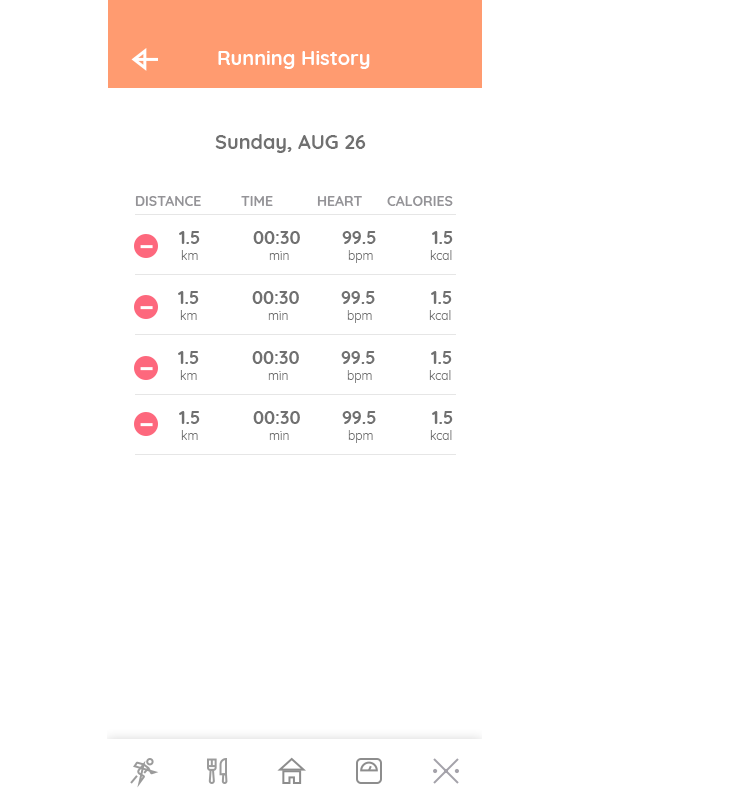
<style>
.page{position:relative;width:743px;height:812px;background:#ffffff}
.page>*{position:absolute;margin:0}
.t1{font:20px "Quicksand-Bold";color:#ffffff}
.t2{font:20px "Quicksand-Bold";color:#707070}
.t3{font:14px "Quicksand-Bold";color:#949397}
.t4{font:18px "Quicksand-Bold";color:#707070}
.t5{font:12px "Quicksand-Regular";color:#707070}
</style>
<div class="page">
<p class="t1" style="left:218px;top:51px;width:152px;height:18px">Running History</p>
<p class="t2" style="left:215px;top:134px;width:151px;height:19px">Sunday, AUG 26</p>
<p class="t3" style="left:135px;top:196px;width:66px;height:10px">DISTANCE</p>
<p class="t3" style="left:241px;top:196px;width:32px;height:10px">TIME</p>
<p class="t3" style="left:317px;top:196px;width:45px;height:10px">HEART</p>
<p class="t3" style="left:387px;top:196px;width:66px;height:10px">CALORIES</p>
<p class="t4" style="left:179px;top:231px;width:21px;height:13px">1.5</p>
<p class="t4" style="left:253px;top:231px;width:47px;height:13px">00:30</p>
<p class="t4" style="left:342px;top:231px;width:34px;height:13px">99.5</p>
<p class="t4" style="left:432px;top:231px;width:21px;height:13px">1.5</p>
<p class="t5" style="left:181px;top:250px;width:17px;height:10px">km</p>
<p class="t5" style="left:269px;top:251px;width:20px;height:9px">min</p>
<p class="t5" style="left:348px;top:250px;width:25px;height:13px">bpm</p>
<p class="t5" style="left:430px;top:250px;width:22px;height:10px">kcal</p>
<p class="t4" style="left:178px;top:291px;width:21px;height:13px">1.5</p>
<p class="t4" style="left:252px;top:291px;width:47px;height:13px">00:30</p>
<p class="t4" style="left:341px;top:291px;width:34px;height:13px">99.5</p>
<p class="t4" style="left:431px;top:291px;width:21px;height:13px">1.5</p>
<p class="t5" style="left:180px;top:310px;width:17px;height:10px">km</p>
<p class="t5" style="left:268px;top:311px;width:20px;height:9px">min</p>
<p class="t5" style="left:347px;top:310px;width:25px;height:13px">bpm</p>
<p class="t5" style="left:429px;top:310px;width:22px;height:10px">kcal</p>
<p class="t4" style="left:178px;top:351px;width:21px;height:13px">1.5</p>
<p class="t4" style="left:252px;top:351px;width:47px;height:13px">00:30</p>
<p class="t4" style="left:341px;top:351px;width:34px;height:13px">99.5</p>
<p class="t4" style="left:431px;top:351px;width:21px;height:13px">1.5</p>
<p class="t5" style="left:180px;top:370px;width:17px;height:10px">km</p>
<p class="t5" style="left:268px;top:371px;width:20px;height:9px">min</p>
<p class="t5" style="left:347px;top:370px;width:25px;height:13px">bpm</p>
<p class="t5" style="left:429px;top:370px;width:22px;height:10px">kcal</p>
<p class="t4" style="left:179px;top:411px;width:21px;height:13px">1.5</p>
<p class="t4" style="left:253px;top:411px;width:47px;height:13px">00:30</p>
<p class="t4" style="left:342px;top:411px;width:34px;height:13px">99.5</p>
<p class="t4" style="left:432px;top:411px;width:21px;height:13px">1.5</p>
<p class="t5" style="left:181px;top:430px;width:17px;height:10px">km</p>
<p class="t5" style="left:269px;top:431px;width:20px;height:9px">min</p>
<p class="t5" style="left:348px;top:430px;width:25px;height:13px">bpm</p>
<p class="t5" style="left:430px;top:430px;width:22px;height:10px">kcal</p>
</div>
